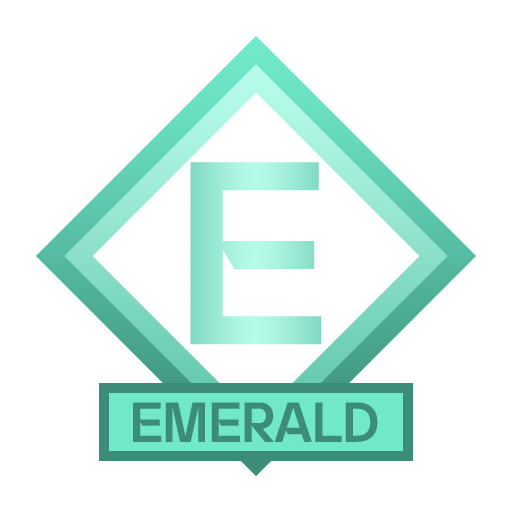
<style>
.page{position:relative;width:512px;height:512px;background:#ffffff}
.page>*{position:absolute;margin:0}
.t1{font:231.8px "yspotlight-regular";color:#9ae9d5}
.t2{font:50px "yspotlight-regular";color:#3b8c79}
</style>
<div class="page">
<p class="t1" style="left:190px;top:162px;width:131px;height:183px">E</p>
<p class="t2" style="left:133px;top:402px;width:245px;height:40px">EMERALD</p>
</div>
